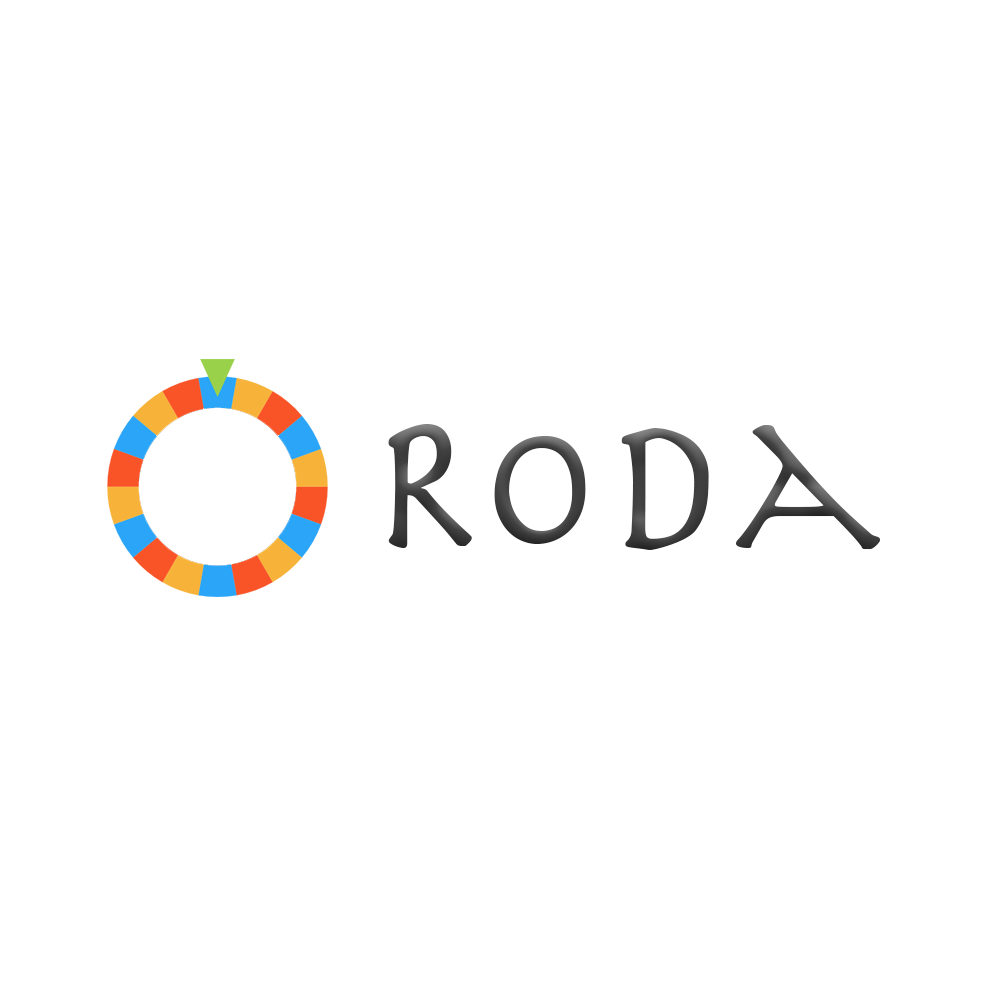
<style>
.page{position:relative;width:1000px;height:1000px;background:#ffffff}
.page>*{position:absolute;margin:0}
.t1{font:200px "Herculanum";color:#404040}
</style>
<div class="page">
<p class="t1" style="left:388px;top:424px;width:492px;height:126px">Roda</p>
</div>
